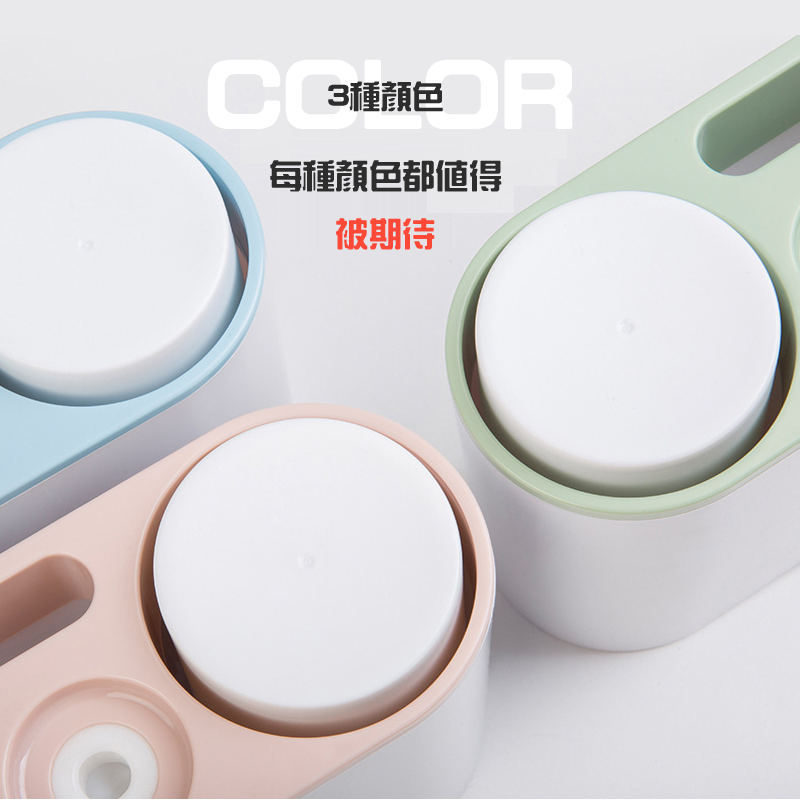
<style>
.page{position:relative;width:800px;height:800px}
.page>*{position:absolute;margin:0}
.t1{font:31.6px "HanWangZonYi";color:#2d2d2d}
.t2{font:33.3px "HanWangZonYi";color:#2d2d2d}
.t3{font:33.3px "HanWangZonYi";color:#ff4938}
</style>
<div class="page">
<p class="t1" style="left:328px;top:81px;width:115px;height:31px">3種顏色</p>
<p class="t2" style="left:270px;top:160px;width:232px;height:90px">每種顏色都值得<br><span class="t3">    被期待</span></p>
</div>
